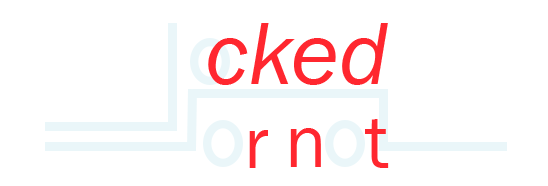
<style>
.page{position:relative;width:548px;height:186px;background:#ffffff}
.page>*{position:absolute;margin:0}
.t1{font:92px "FranklinGothic-BookItalic";color:#ff272f}
.t2{font:77px "FranklinGothic-Book";color:#ff272f}
.t3{font:75px "FranklinGothic-Book";color:#ff272f}
</style>
<div class="page">
<p class="t1" style="left:208px;top:23px;width:180px;height:62px">cked</p>
<p class="t2" style="left:290px;top:119px;width:99px;height:49px">n  t</p>
<p class="t3" style="left:249px;top:130px;width:19px;height:38px">r</p>
</div>
